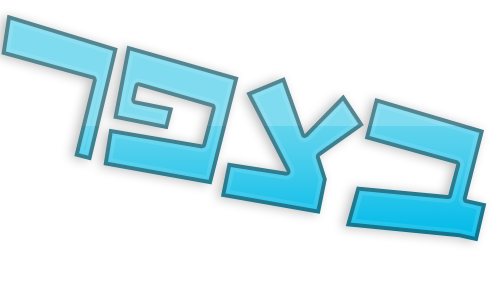
<style>
.page{position:relative;width:500px;height:300px;background:#ffffff}
.page>*{position:absolute;margin:0}
.t1{font:125px "BNCaptain"}
</style>
<div class="page">
<p class="t1" style="left:1px;top:14px;width:486px;height:228px;rotate:13deg">בצפר</p>
</div>
